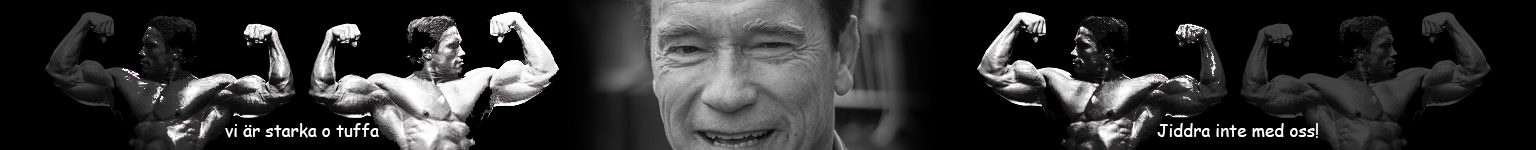
<style>
.page{position:relative;width:1536px;height:150px;background:#000000}
.page>*{position:absolute;margin:0}
.t1{font:17.1px "ComicSansMS";color:#ffffff}
</style>
<div class="page">
<p class="t1" style="left:225px;top:123px;width:154px;height:15px">vi är starka o tuffa</p>
<p class="t1" style="left:1157px;top:123px;width:161px;height:15px">Jiddra inte med oss!</p>
</div>
